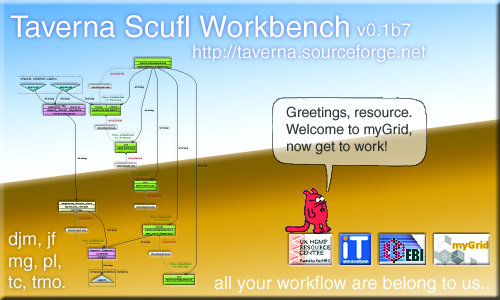
<style>
.page{position:relative;width:500px;height:300px}
.page>*{position:absolute;margin:0}
.t1{font:30px "Helvetica";color:#ffffff}
.t2{font:18px "Helvetica";color:#ffffff}
.t3{font:14px "Helvetica";color:#303636}
</style>
<div class="page">
<p class="t1" style="left:10px;top:15px;width:339px;height:23px">Taverna Scufl Workbench</p>
<p class="t2" style="left:357px;top:23px;width:54px;height:14px">v0.1b7</p>
<p class="t2" style="left:193px;top:44px;width:233px;height:18px">http://taverna.sourceforge.net</p>
<p class="t3" style="left:286px;top:106px;width:126px;height:49px">Greetings, resource.<br>Welcome to myGrid,<br>now get to work!</p>
<p class="t2" style="left:8px;top:231px;width:57px;height:60px">djm, jf<br>mg, pl,<br>tc, tmo.</p>
<p class="t2" style="left:214px;top:275px;width:275px;height:18px">all your workflow are belong to us..</p>
</div>
